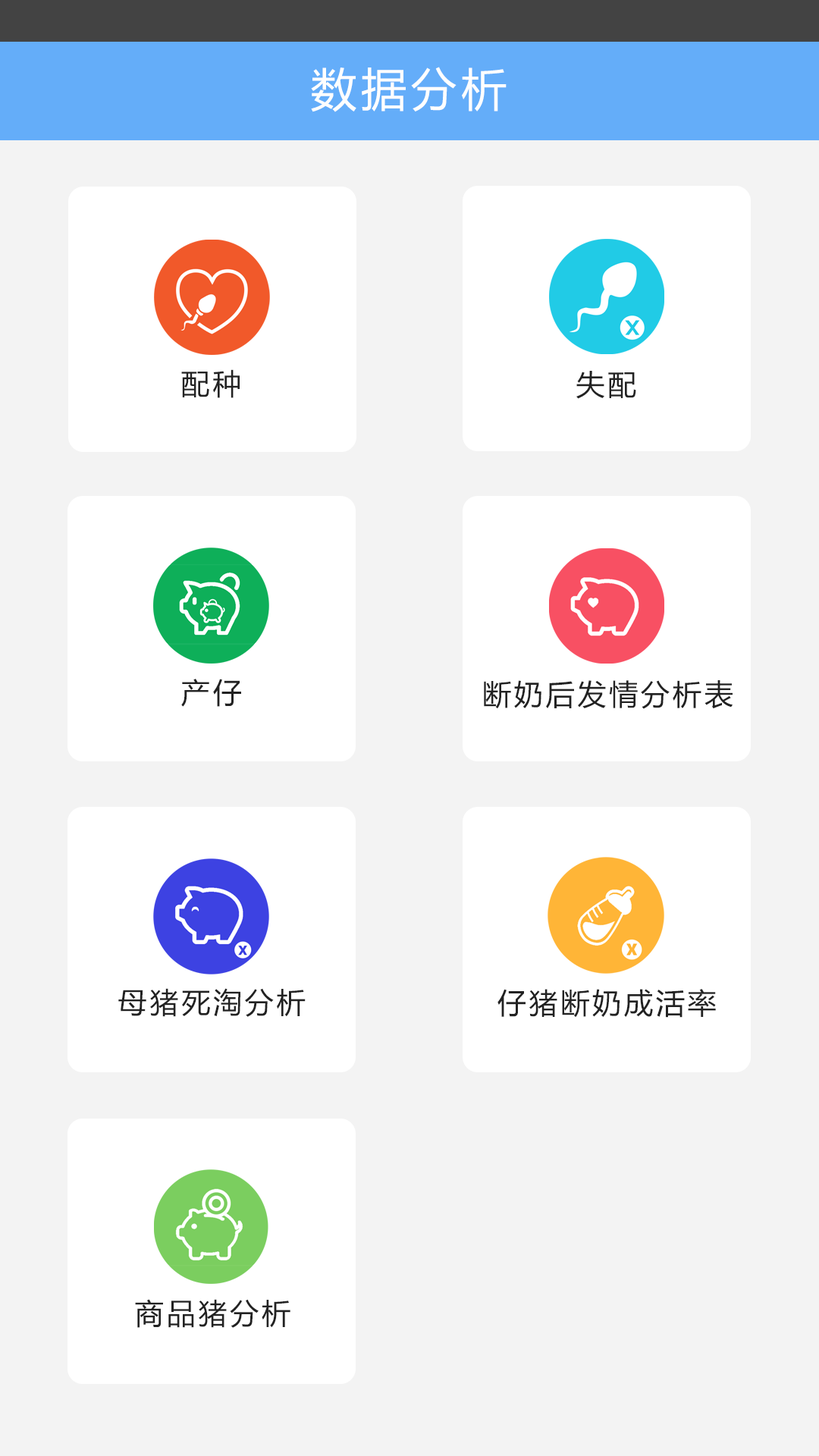
<style>
.page{position:relative;width:819px;height:1456px;background:#f3f3f3}
.page>*{position:absolute;margin:0}
.t1{font:45.5px "MicrosoftYaHei";letter-spacing:0.1em;color:#fefefe}
.t2{font:28.8px "MicrosoftYaHei";letter-spacing:0.1em;color:#222222}
</style>
<div class="page">
<p class="t1" style="left:311px;top:67px;width:196px;height:45px">数据分析</p>
<p class="t2" style="left:181px;top:369px;width:59px;height:29px">配种</p>
<p class="t2" style="left:576px;top:371px;width:60px;height:28px">失配</p>
<p class="t2" style="left:181px;top:679px;width:60px;height:28px">产仔</p>
<p class="t2" style="left:484px;top:680px;width:249px;height:29px">断奶后发情分析表</p>
<p class="t2" style="left:118px;top:988px;width:188px;height:29px">母猪死淘分析</p>
<p class="t2" style="left:497px;top:989px;width:219px;height:29px">仔猪断奶成活率</p>
<p class="t2" style="left:135px;top:1299px;width:155px;height:29px">商品猪分析</p>
</div>
